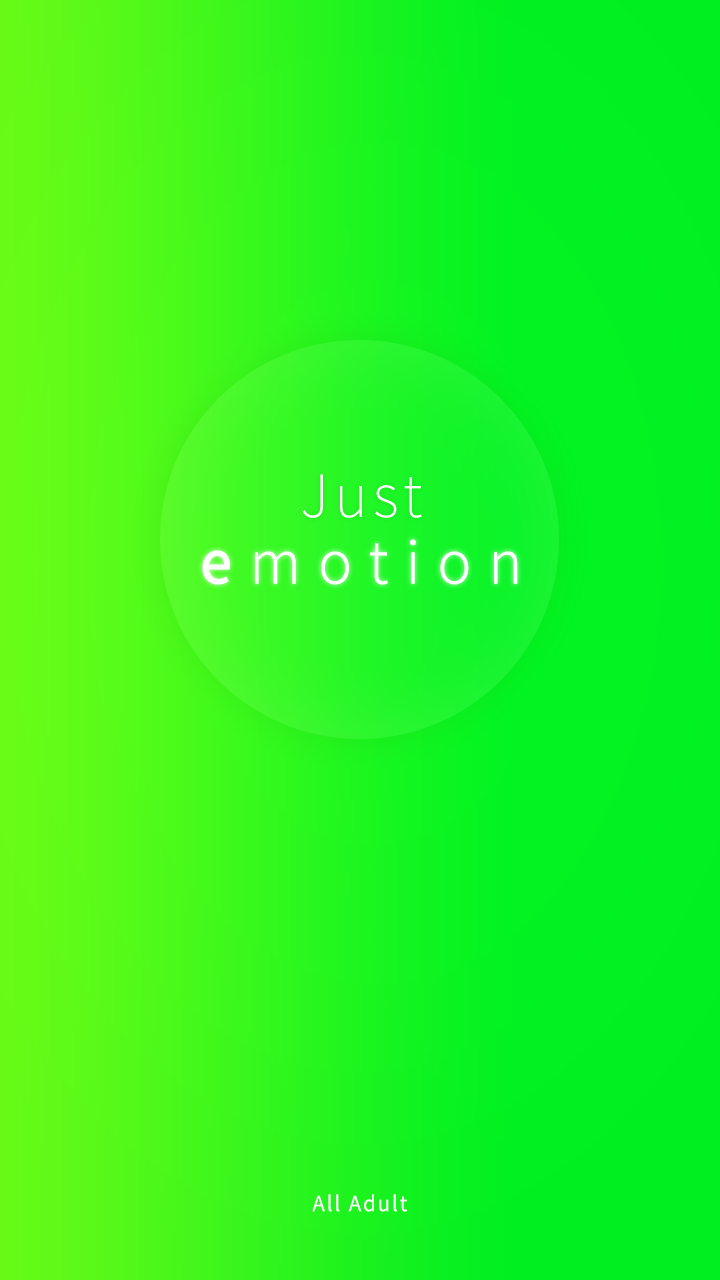
<style>
.page{position:relative;width:720px;height:1280px}
.page>*{position:absolute;margin:0}
.t1{font:58.3px "NotoSansCJKkr-Thin";letter-spacing:0.1em;color:#ffffff}
.t2{font:58.3px "NotoSansCJKkr-Light";letter-spacing:0.3em;color:#ffffff}
.t3{font:58.3px "NotoSansCJKkr-Medium";letter-spacing:0.3em;color:#ffffff}
.t4{font:20.8px "NotoSansCJKkr-DemiLight";letter-spacing:0.1em;color:#ffffff}
</style>
<div class="page">
<p class="t1" style="left:302px;top:474px;width:120px;height:44px">Just</p>
<p class="t2" style="left:202px;top:539px;width:316px;height:46px"><span class="t1"><br></span><span class="t3">e</span>motion</p>
<p class="t4" style="left:312px;top:1194px;width:95px;height:18px">All Adult</p>
</div>
